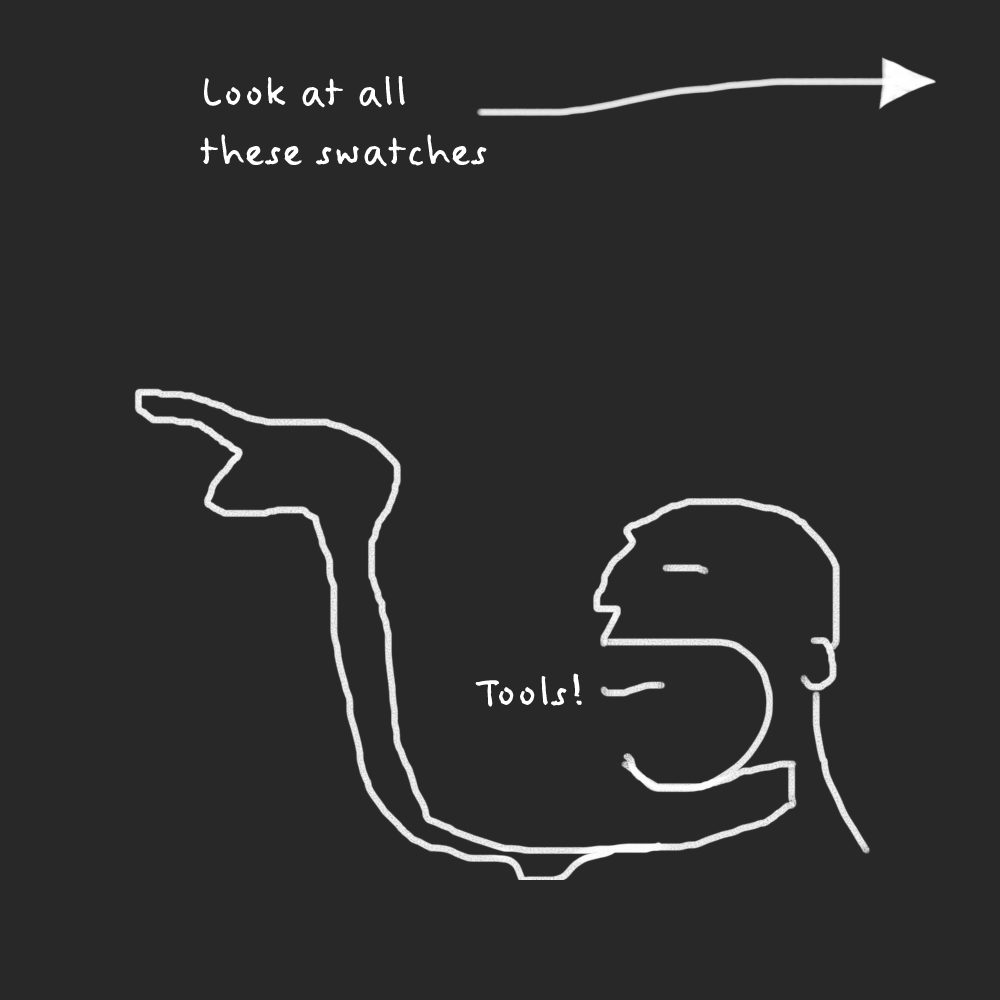
<style>
.page{position:relative;width:1000px;height:1000px;background:#282828}
.page>*{position:absolute;margin:0}
.t1{font:52px/59px "FeltTipWoman";color:#ffffff}
.t2{font:52px "FeltTipWoman";color:#ffffff}
</style>
<div class="page">
<p class="t1" style="left:200px;top:76px;width:287px;height:91px">Look at all<br>these swatches</p>
<p class="t2" style="left:475px;top:673px;width:107px;height:34px">Tools!</p>
</div>
